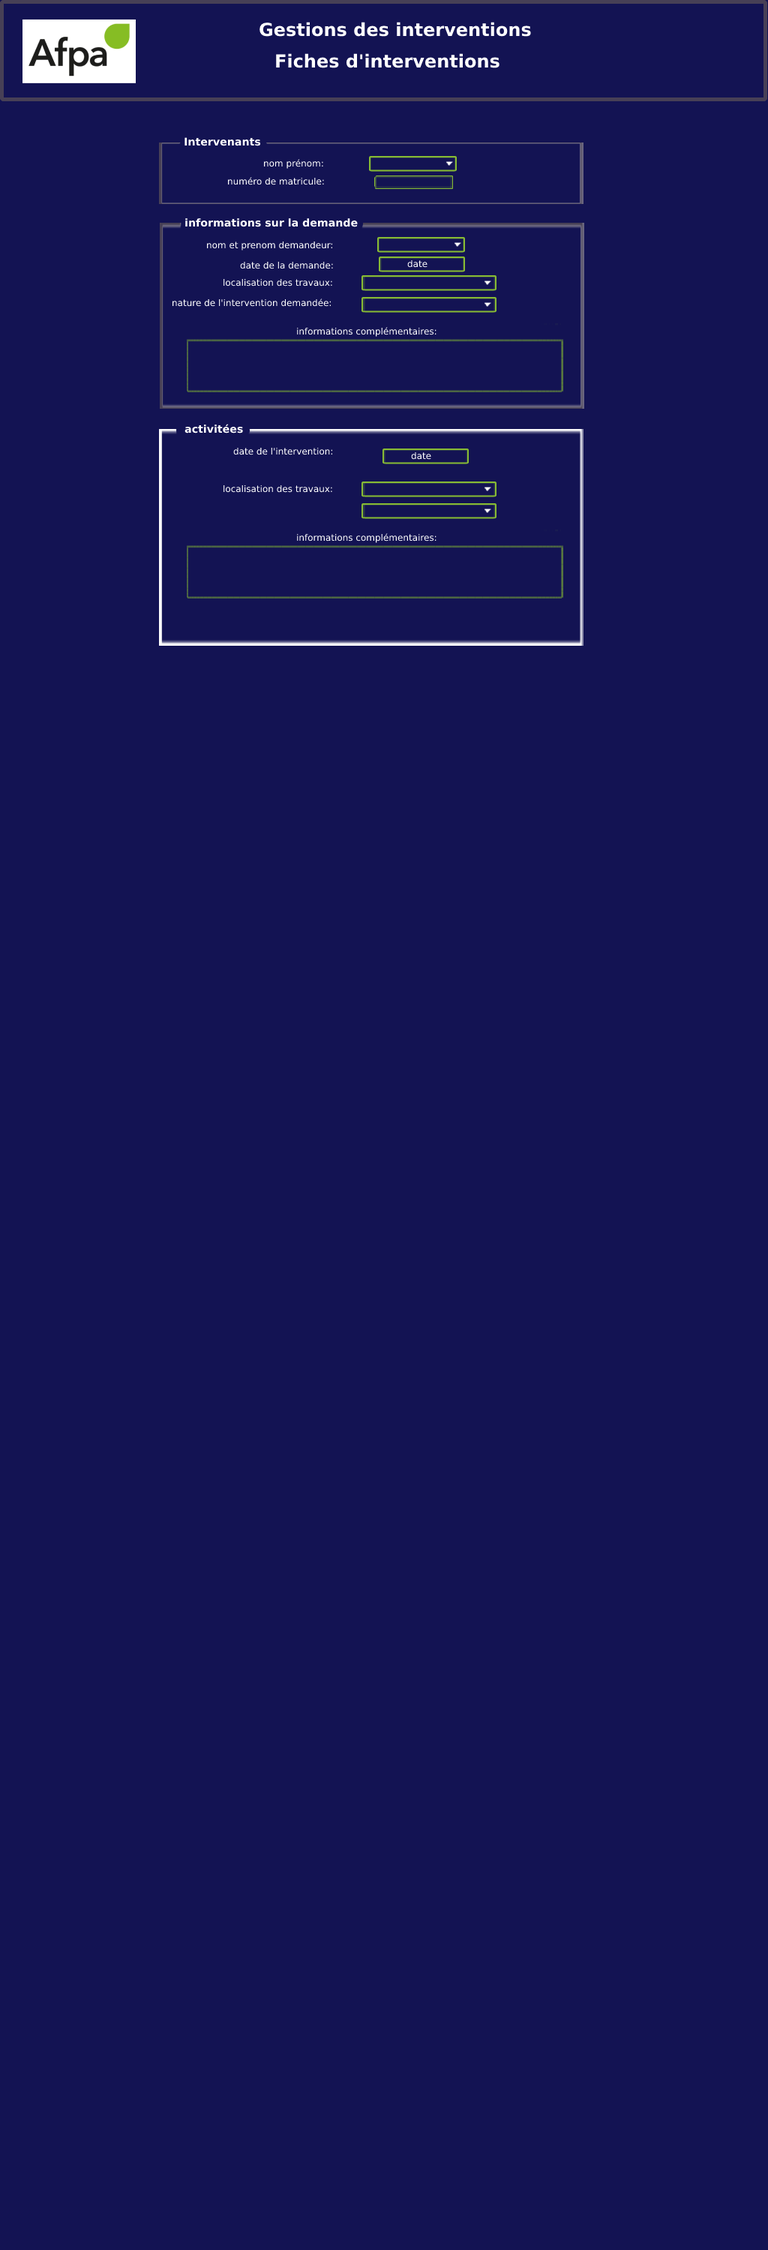
<style>
.page{position:relative;width:768px;height:2250px;background:#131353}
.page>*{position:absolute;margin:0}
.t1{font:18px "DejaVuSans-Bold";color:#ffffff}
.t2{font:10.6px "DejaVuSans-Bold";color:#ffffff}
.t3{font:9px "DejaVuSans";color:#ffffff}
</style>
<div class="page">
<p class="t1" style="left:260px;top:22px;width:271px;height:15px">Gestions des interventions</p>
<p class="t1" style="left:276px;top:53px;width:224px;height:15px">Fiches d'interventions</p>
<p class="t2" style="left:184px;top:137px;width:76px;height:9px">Intervenants</p>
<p class="t3" style="left:264px;top:159px;width:59px;height:10px">nom prénom:</p>
<p class="t3" style="left:228px;top:177px;width:96px;height:8px">numéro de matricule:</p>
<p class="t2" style="left:185px;top:218px;width:173px;height:9px">informations sur la demande</p>
<p class="t3" style="left:207px;top:241px;width:126px;height:9px">nom et prenom demandeur:</p>
<p class="t3" style="left:240px;top:261px;width:93px;height:8px">date de la demande:</p>
<p class="t3" style="left:407px;top:260px;width:21px;height:8px">date</p>
<p class="t3" style="left:224px;top:278px;width:108px;height:8px">localisation des travaux:</p>
<p class="t3" style="left:172px;top:298px;width:160px;height:9px">nature de l'intervention demandée:</p>
<p class="t3" style="left:297px;top:327px;width:139px;height:10px">informations complémentaires:</p>
<p class="t2" style="left:184px;top:424px;width:59px;height:10px">activitées</p>
<p class="t3" style="left:233px;top:447px;width:99px;height:8px">date de l'intervention:</p>
<p class="t3" style="left:411px;top:452px;width:20px;height:8px">date</p>
<p class="t3" style="left:224px;top:484px;width:108px;height:9px">localisation des travaux:</p>
<p class="t3" style="left:297px;top:533px;width:139px;height:10px">informations complémentaires:</p>
</div>
